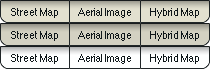
<style>
.page{position:relative;width:210px;height:69px}
.page>*{position:absolute;margin:0}
.t1{font:10px "Helvetica";color:#0e1619}
</style>
<div class="page">
<p class="t1" style="left:11px;top:8px;width:188px;height:10px">Street Map          Aerial Image         Hybrid Map</p>
<p class="t1" style="left:11px;top:31px;width:188px;height:10px">Street Map          Aerial Image         Hybrid Map</p>
<p class="t1" style="left:11px;top:54px;width:188px;height:10px">Street Map          Aerial Image         Hybrid Map</p>
</div>
